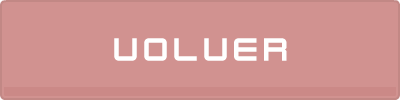
<style>
.page{position:relative;width:400px;height:100px;background:#d19290}
.page>*{position:absolute;margin:0}
.t1{font:36px "KenVector-Future";color:#ffffff}
</style>
<div class="page">
<p class="t1" style="left:114px;top:38px;width:173px;height:23px">volver</p>
</div>
